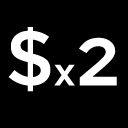
<style>
.page{position:relative;width:128px;height:128px;background:#000000}
.page>*{position:absolute;margin:0}
.t1{font:77.2px "MontserratAlternates-Regular";color:#ffffff}
.t2{font:38.6px "MontserratAlternates-Regular";color:#ffffff}
</style>
<div class="page">
<p class="t1" style="left:8px;top:27px;width:109px;height:65px">$<span class="t2">x</span>2</p>
</div>
